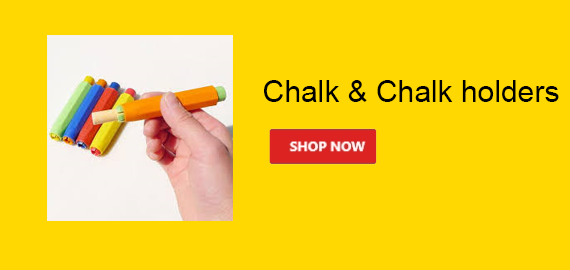
<style>
.page{position:relative;width:570px;height:270px;background:#ffd801}
.page>*{position:absolute;margin:0}
.t1{font:30px "ArialMT";color:#000000}
</style>
<div class="page">
<p class="t1" style="left:264px;top:80px;width:295px;height:22px">Chalk &amp; Chalk holders</p>
</div>
